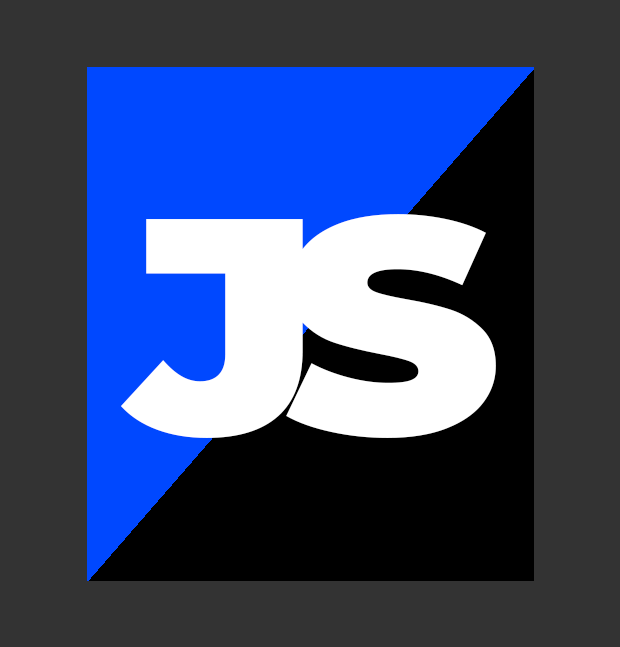
<style>
.page{position:relative;width:620px;height:647px;background:#333333}
.page>*{position:absolute;margin:0}
.t1{font:305.6px "Montserrat-Black";letter-spacing:-0.115em;color:#ffffff;scale:1.09 1}
</style>
<div class="page">
<p class="t1" style="left:121px;top:214px;width:375px;height:224px">JS</p>
</div>
